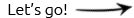
<style>
.page{position:relative;width:134px;height:18px;background:#ffffff}
.page>*{position:absolute;margin:0}
.t1{font:16px "Ubuntu-Light";color:#000000}
</style>
<div class="page">
<p class="t1" style="left:8px;top:3px;width:59px;height:15px">Let’s go!</p>
</div>
